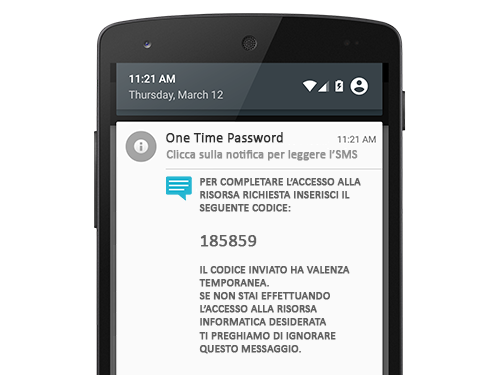
<style>
.page{position:relative;width:500px;height:375px;background:#ffffff}
.page>*{position:absolute;margin:0}
.t1{font:14px "Calibri";color:#2d2d2d;font-weight:bold}
.t2{font:12px "Calibri";color:#909090;font-weight:bold}
.t3{font:11px "Calibri";color:#616161;font-weight:bold}
.t4{font:18px "Calibri";color:#616161;font-weight:bold}
</style>
<div class="page">
<p class="t1" style="left:166px;top:132px;width:117px;height:11px">One Time Password</p>
<p class="t2" style="left:166px;top:150px;width:192px;height:11px">Clicca sulla notifica per leggere l’SMS</p>
<p class="t3" style="left:199px;top:178px;width:162px;height:176px">PER COMPLETARE L’ACCESSO ALLA<br>RISORSA RICHIESTA INSERISCI IL <br>SEGUENTE CODICE:<br><br><span class="t4">185859<br></span><br>IL CODICE INVIATO HA VALENZA<br>TEMPORANEA.<br>SE NON STAI EFFETTUANDO <br>L’ACCESSO ALLA RISORSA<br>INFORMATICA DESIDERATA<br>TI PREGHIAMO DI IGNORARE <br>QUESTO MESSAGGIO.</p>
</div>
